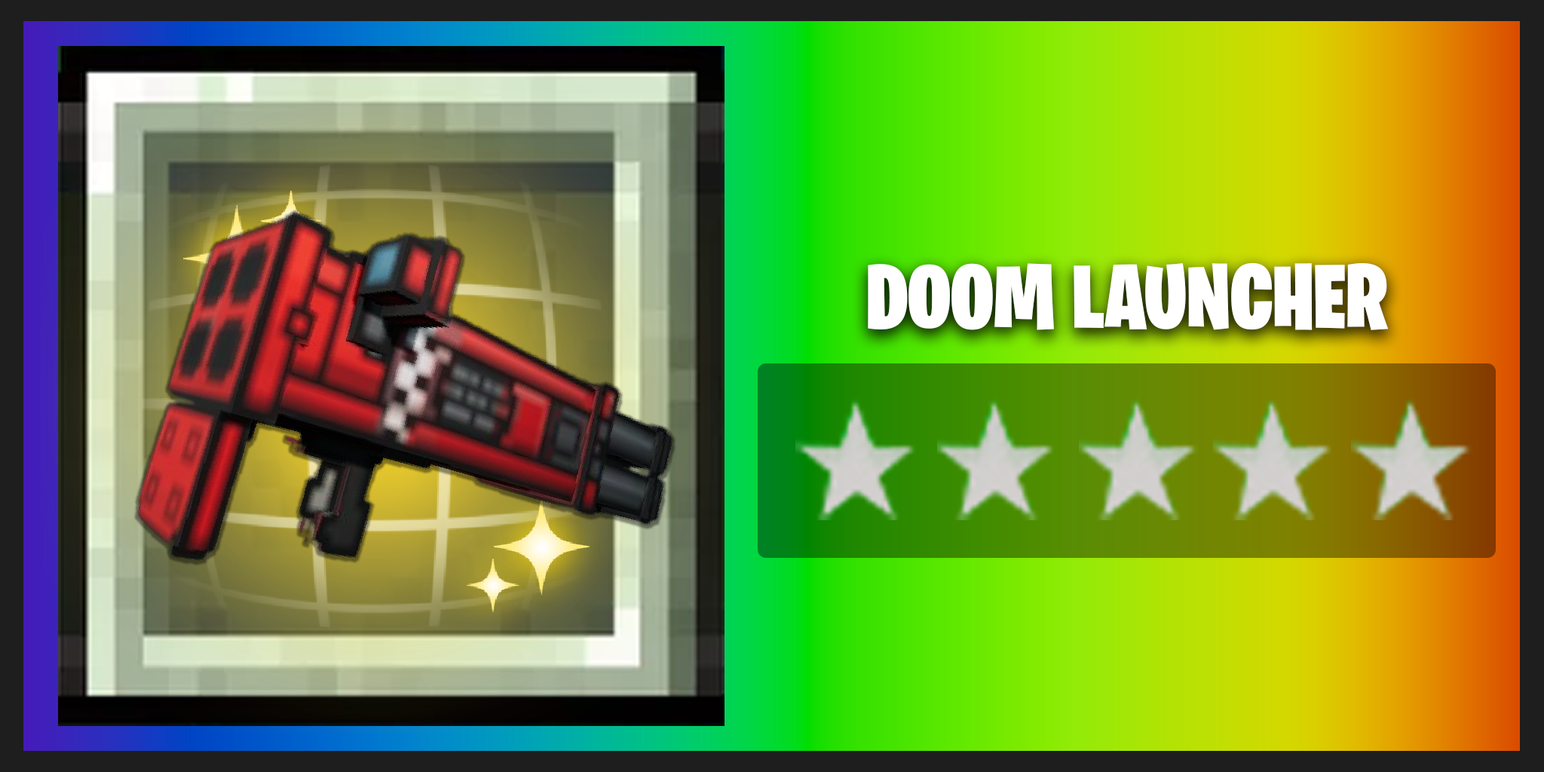
<style>
.page{position:relative;width:1544px;height:772px}
.page>*{position:absolute;margin:0}
.t1{font:90.5px "BurbankBigCondensed-Black";color:#ffffff}
</style>
<div class="page">
<p class="t1" style="left:868px;top:262px;width:521px;height:68px">DOOM LAUNCHER</p>
</div>
